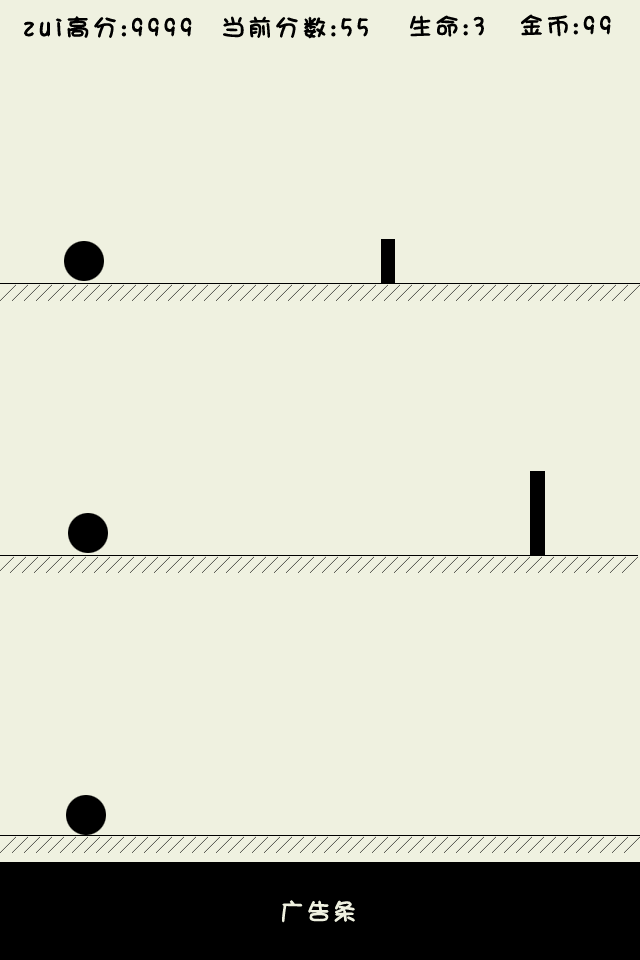
<style>
.page{position:relative;width:640px;height:960px;background:#eff1e0}
.page>*{position:absolute;margin:0}
.t1{font:24px "DFShaoNvW5";letter-spacing:0.24em;color:#000000;font-weight:bold}
.t2{font:24px "DFShaoNvW5";letter-spacing:0.24em;color:#eff1e0;font-weight:bold}
</style>
<div class="page">
<p class="t1" style="left:24px;top:16px;width:168px;height:22px">zui高分：9999</p>
<p class="t1" style="left:223px;top:16px;width:145px;height:23px">当前分数：55</p>
<p class="t1" style="left:410px;top:15px;width:74px;height:22px">生命：3</p>
<p class="t1" style="left:521px;top:14px;width:90px;height:23px">金币：99</p>
<p class="t2" style="left:282px;top:900px;width:73px;height:23px">广告条</p>
</div>
